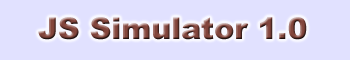
<style>
.page{position:relative;width:350px;height:60px;background:#e1e1ff}
.page>*{position:absolute;margin:0}
.t1{font:30px "Arial-Black"}
</style>
<div class="page">
<p class="t1" style="left:38px;top:17px;width:269px;height:23px">JS Simulator 1.0</p>
</div>
